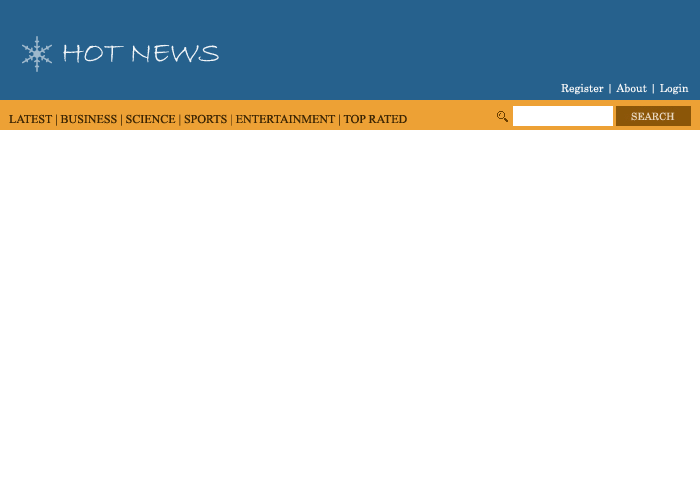
<style>
.page{position:relative;width:700px;height:500px;background:#ffffff}
.page>*{position:absolute;margin:0}
.t1{font:11px "Century";color:#f7f7f7}
.t2{font:12px "TimesNewRomanPSMT";color:#3d2603}
</style>
<div class="page">
<p class="t1" style="left:561px;top:83px;width:128px;height:12px">Register | About | Login</p>
<p class="t2" style="left:9px;top:114px;width:398px;height:12px">LATEST | BUSINESS | SCIENCE | SPORTS | ENTERTAINMENT | TOP RATED</p>
</div>
